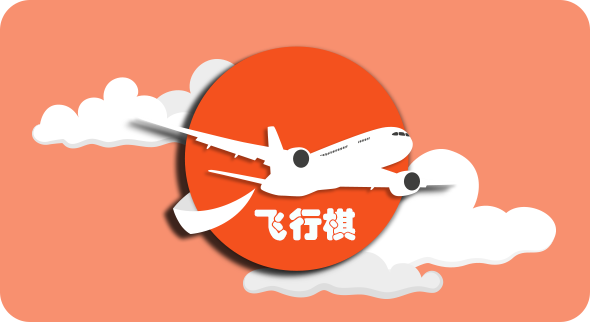
<style>
.page{position:relative;width:590px;height:322px;background:#f8906f}
.page>*{position:absolute;margin:0}
.t1{font:34.2px "STHupo";color:#f8ffff}
</style>
<div class="page">
<p class="t1" style="left:254px;top:208px;width:102px;height:33px">飞行棋</p>
</div>
